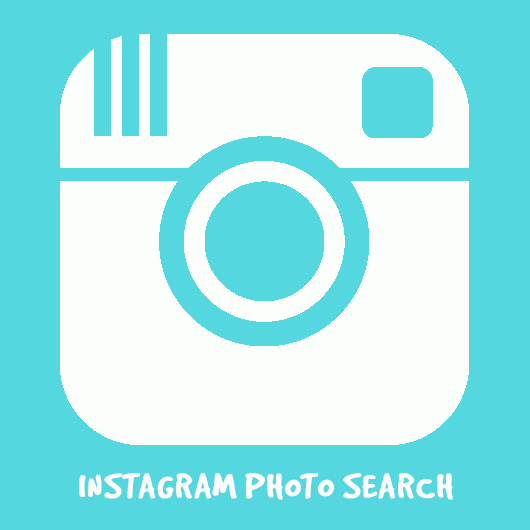
<style>
.page{position:relative;width:530px;height:530px;background:#55d7df}
.page>*{position:absolute;margin:0}
.t1{font:39px "GoodDogPlain";letter-spacing:0.01em;color:#ffffff;text-transform:uppercase;font-weight:bold}
</style>
<div class="page">
<p class="t1" style="left:79px;top:473px;width:374px;height:27px">instagram Photo Search</p>
</div>
